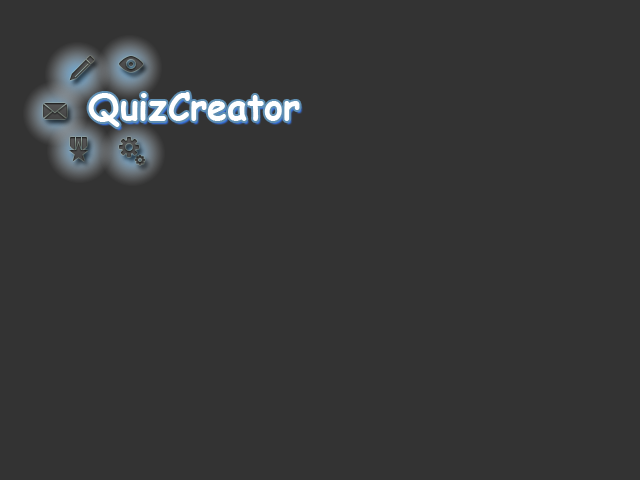
<style>
.page{position:relative;width:640px;height:480px;background:#333333}
.page>*{position:absolute;margin:0}
.t1{font:36px "ComicSansMS-Bold";color:#ffffff}
</style>
<div class="page">
<p class="t1" style="left:88px;top:92px;width:212px;height:35px">QuizCreator</p>
</div>
